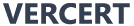
<style>
.page{position:relative;width:134px;height:26px;background:#ffffff}
.page>*{position:absolute;margin:0}
.t1{font:29.1px "Ebrima-Bold";color:#343f52}
</style>
<div class="page">
<p class="t1" style="left:3px;top:3px;width:127px;height:22px">VERCERT</p>
</div>
